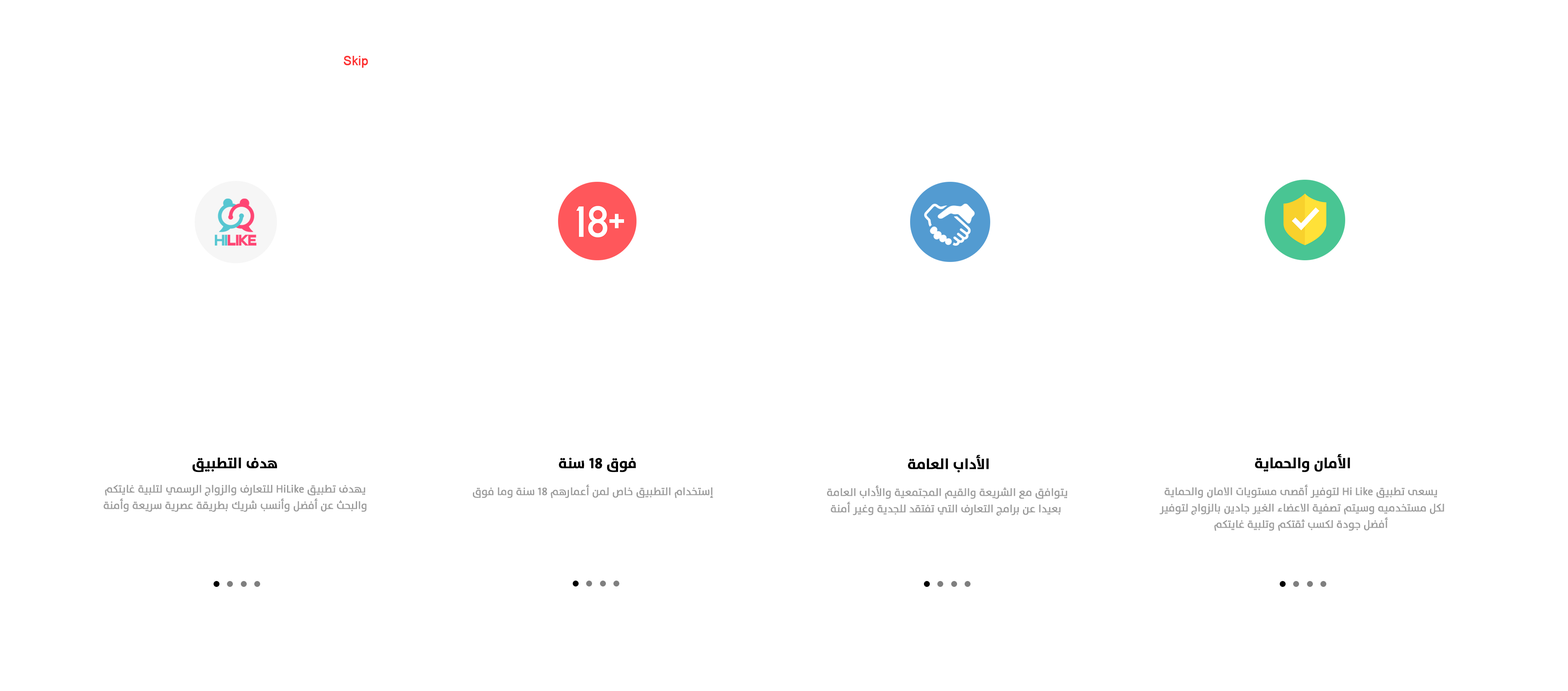
<style>
.page{position:relative;width:1568px;height:691px;background:#ffffff}
.page>*{position:absolute;margin:0}
.t1{font:12.8px "ArialMT";color:#fd3030;font-weight:bold;scale:0.95 1}
.t2{font:14.7px "TheSans-Bold";color:#000000;font-weight:bold;scale:0.95 1}
.t3{font:10.7px "TheSans-Plain";color:#9b9b9b;font-weight:bold;scale:0.95 1}
</style>
<div class="page">
<p class="t1" style="left:344px;top:56px;width:24px;height:12px">Skip</p>
<p class="t2" style="left:192px;top:457px;width:85px;height:15px">هدف التطبيق</p>
<p class="t2" style="left:559px;top:457px;width:77px;height:15px">فوق 18 سنة</p>
<p class="t2" style="left:908px;top:454px;width:81px;height:18px">الأداب العامة</p>
<p class="t2" style="left:1255px;top:454px;width:95px;height:18px">الأمان والحماية</p>
<p class="t3" style="left:104px;top:484px;width:263px;height:27px;text-align:center">يهدف تطبيق HiLike للتعارف والزواج الرسمي لتلبية غايتكم<br> <br>والبحث عن أفضل وأنسب شريك بطريقة عصرية سريعة وأمنة</p>
<p class="t3" style="left:473px;top:484px;width:240px;height:14px">إستخدام التطبيق خاص لمن أعمارهم 18 سنة وما فوق</p>
<p class="t3" style="left:827px;top:485px;width:240px;height:31px;text-align:center">يتوافق مع الشريعة والقيم المجتمعية والأداب العامة<br><br> بعيدا عن برامج التعارف التي تفتقد للجدية وغير أمنة</p>
<p class="t3" style="left:1159px;top:484px;width:285px;height:47px;text-align:center">يسعى تطبيق Hi Like لتوفير أقصى مستويات الامان والحماية<br><br>لكل مستخدميه وسيتم تصفية الاعضاء الغير جادين بالزواج لتوفير <br><br>أفضل جودة لكسب ثقتكم وتلبية غايتكم</p>
</div>
